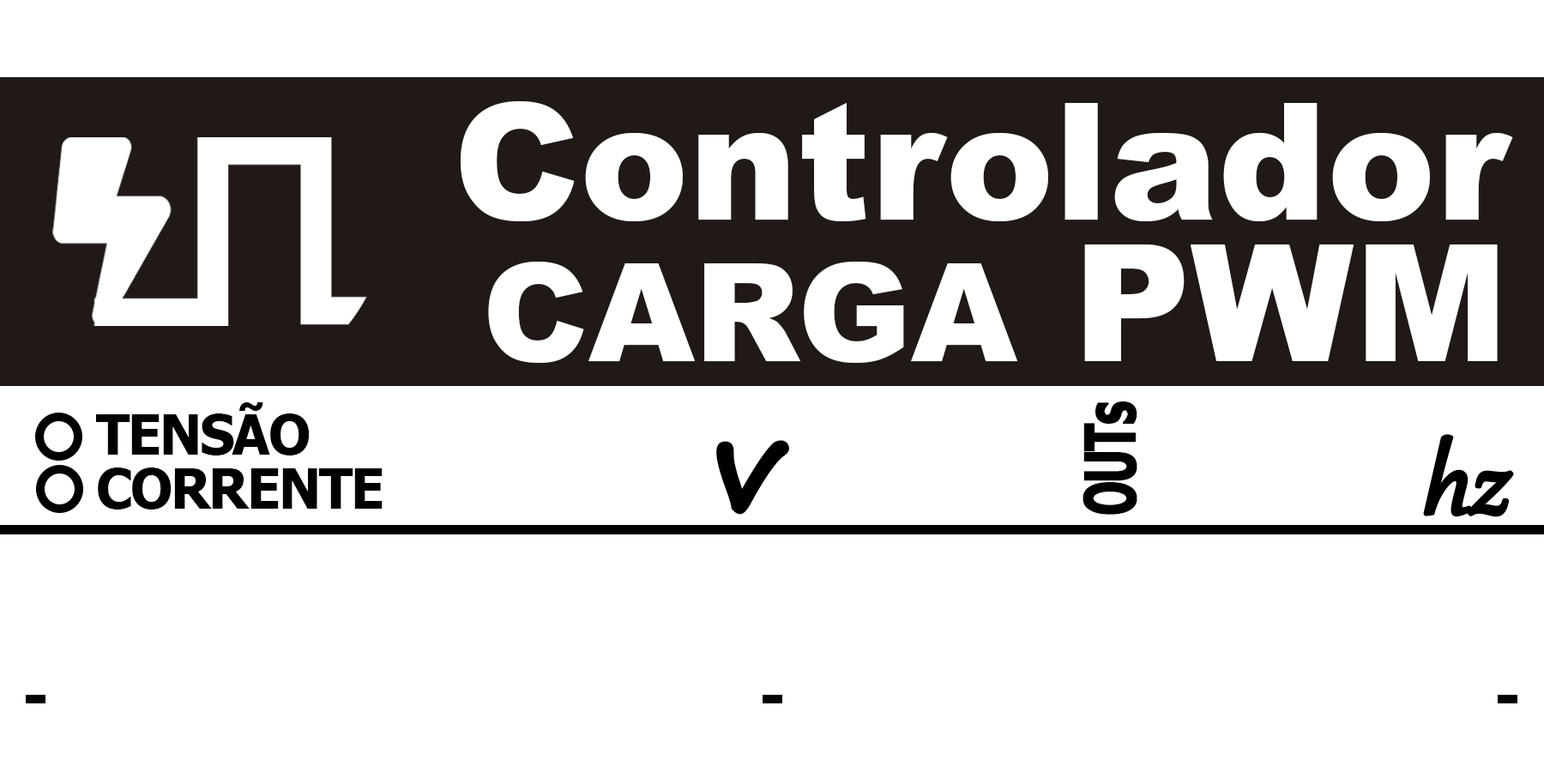
<style>
.page{position:relative;width:1544px;height:772px;background:#ffffff}
.page>*{position:absolute;margin:0}
.t1{font:163.4px/141.6px "Arial-Black";color:#ffffff}
.t2{font:136.2px/141.6px "Arial-Black";color:#ffffff}
.t3{font:69.9px "Tahoma-Bold";letter-spacing:-0.05em;color:#010101;font-weight:bold;scale:0.63 1}
.t4{font:54.5px/54.5px "Tahoma-Bold";letter-spacing:-0.03em;color:#010101}
.t5{font:114.6px "Gabriola";letter-spacing:-0.025em;color:#010101;font-weight:bold;font-style:italic}
.t6{font:127.1px "SegoePrint-Bold";letter-spacing:-0.01em;color:#010101;font-weight:bold}
</style>
<div class="page">
<p class="t1" style="left:460px;top:101px;width:1053px;height:262px;text-align:right">Controlador<br><span class="t2">CARGA </span>PWM</p>
<p class="t3" style="left:1083px;top:402px;width:55px;height:113px;rotate:-90deg">OUTs</p>
<p class="t4" style="left:96px;top:402px;width:287px;height:108px">TENSÃO<br>CORRENTE</p>
<p class="t5" style="left:1425px;top:436px;width:88px;height:80px">hz</p>
<p class="t6" style="left:716px;top:440px;width:74px;height:75px">v</p>
</div>
